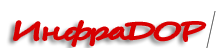
<style>
.page{position:relative;width:218px;height:48px;background:#ffffff}
.page>*{position:absolute;margin:0}
.t1{font:24px "SegoeScript";letter-spacing:-0.1em;color:#d80001;scale:1.5 1}
</style>
<div class="page">
<p class="t1" style="left:14px;top:21px;width:192px;height:25px">ИнфраДОР</p>
</div>
